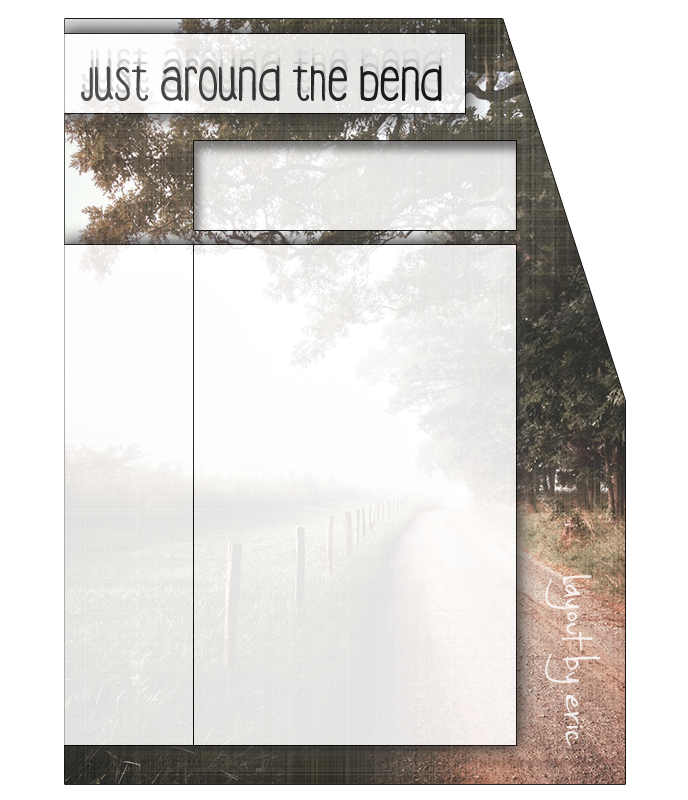
<style>
.page{position:relative;width:688px;height:800px;background:#ffffff}
.page>*{position:absolute;margin:0}
.t1{font:32px "DJBCoffeeShoppeEspresso"}
.t2{font:60px "SmallTownSkyline";color:#ffffff}
</style>
<div class="page">
<p class="t1" style="left:82px;top:57px;width:67px;height:36px">Just</p>
<p class="t1" style="left:162px;top:57px;width:119px;height:36px">around</p>
<p class="t2" style="left:545px;top:575px;width:55px;height:171px;rotate:90deg;opacity:0.8">layout by eric</p>
</div>
